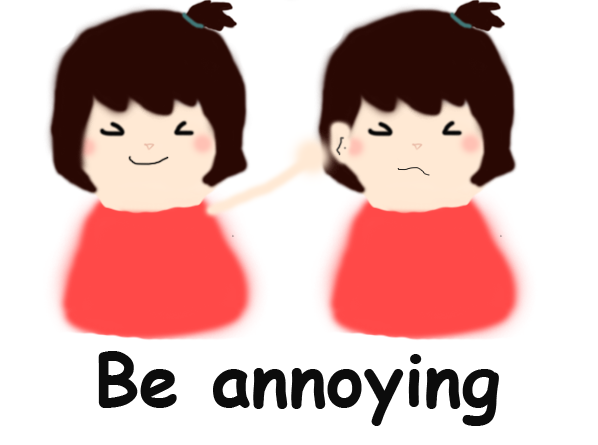
<style>
.page{position:relative;width:598px;height:445px;background:#ffffff}
.page>*{position:absolute;margin:0}
.t1{font:72px "ComicSansMS-Bold";color:#0c0c0c}
</style>
<div class="page">
<p class="t1" style="left:98px;top:351px;width:401px;height:75px">Be annoying</p>
</div>
